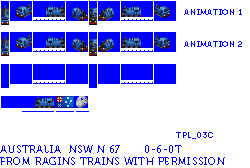
<style>
.page{position:relative;width:250px;height:168px;background:#ffffff}
.page>*{position:absolute;margin:0}
.t1{font:8px "Museo700-Regular";letter-spacing:0.075em;color:#0000ff;text-transform:uppercase}
.t2{font:10px "Museo700-Regular";letter-spacing:0.075em;color:#0000ff;text-transform:uppercase}
</style>
<div class="page">
<p class="t1" style="left:184px;top:9px;width:58px;height:6px">Animation 1</p>
<p class="t1" style="left:184px;top:41px;width:58px;height:6px">Animation 2</p>
<p class="t1" style="left:176px;top:132px;width:37px;height:7px">tpl_03c</p>
<p class="t2" style="left:0px;top:145px;width:225px;height:20px">australia  nsw n 67 0-6-0T<br>from ragins trains with permission</p>
</div>
